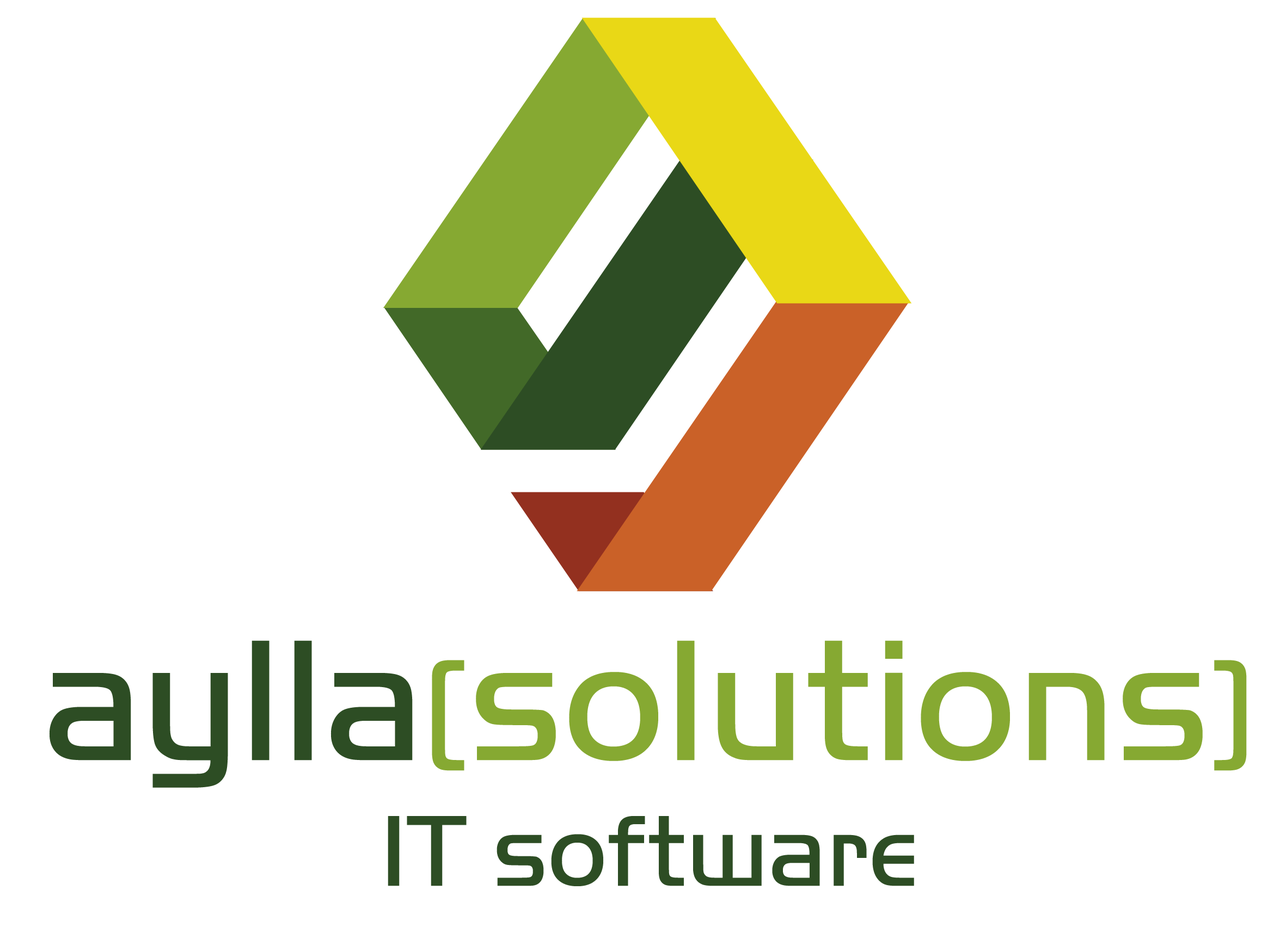
<style>
.page{position:relative;width:1286px;height:927px;background:#ffffff}
.page>*{position:absolute;margin:0}
.t1{font:104.4px "HandelGotD-Ligh";color:#2d4d24}
.t2{font:179px "HandelGotD-Ligh";color:#2d4d24}
.t3{font:134.2px "HandelGotD-Ligh";color:#86a932}
.t4{font:179px "HandelGotD-Ligh";color:#86a932}
</style>
<div class="page">
<p class="t1" style="left:49px;top:641px;width:1197px;height:246px;text-align:center"><span class="t2">aylla</span><span class="t3">[</span><span class="t4">solutions</span><span class="t3">]<br></span>IT software</p>
</div>
